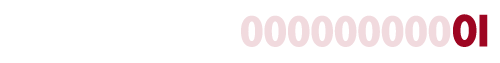
<style>
.page{position:relative;width:500px;height:63px;background:#ffffff}
.page>*{position:absolute;margin:0}
.t1{font:46px "AbadiMT-CondensedExtraBold";color:#f1dade}
.t2{font:46px "AbadiMT-CondensedExtraBold";color:#9e0622}
</style>
<div class="page">
<p class="t1" style="left:241px;top:15px;width:210px;height:32px">000000000</p>
<p class="t2" style="left:453px;top:14px;width:35px;height:33px">OI</p>
</div>
